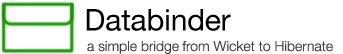
<style>
.page{position:relative;width:343px;height:54px;background:#ffffff}
.page>*{position:absolute;margin:0}
.t1{font:30px "HelveticaNeue";letter-spacing:-0.005em;color:#000000}
.t2{font:14px "HelveticaNeue-Light";color:#444444}
</style>
<div class="page">
<p class="t1" style="left:86px;top:9px;width:145px;height:22px">Databinder</p>
<p class="t2" style="left:87px;top:41px;width:246px;height:13px">a simple bridge from Wicket to Hibernate</p>
</div>
